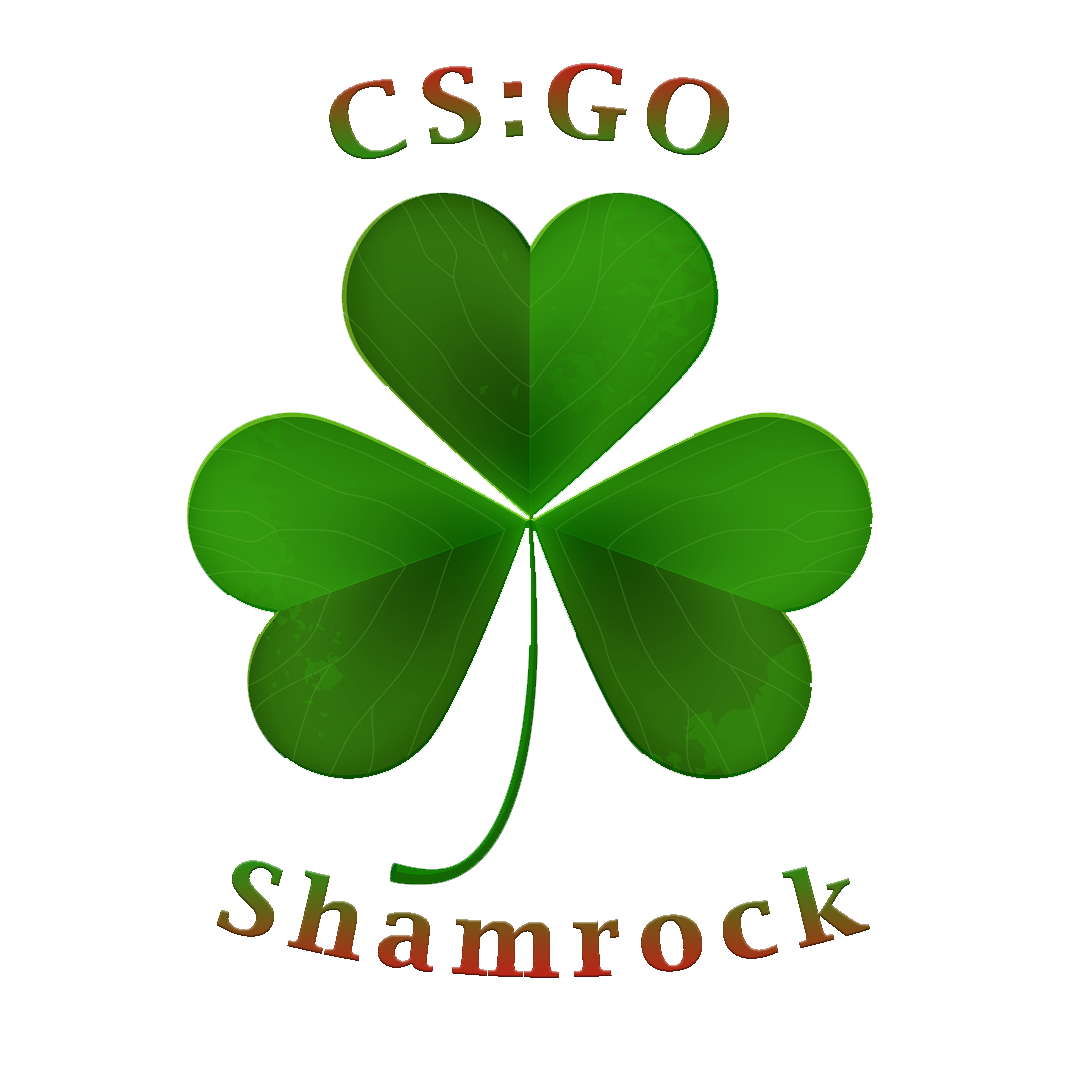
<style>
.page{position:relative;width:1080px;height:1080px;background:#ffffff}
.page>*{position:absolute;margin:0}
.t1{font:100px "LucidaBright-Demi";letter-spacing:0.15em}
</style>
<div class="page">
<p class="t1" style="left:329px;top:63px;width:400px;height:96px">CS:GO</p>
<p class="t1" style="left:217px;top:860px;width:653px;height:118px">Shamrock</p>
</div>
